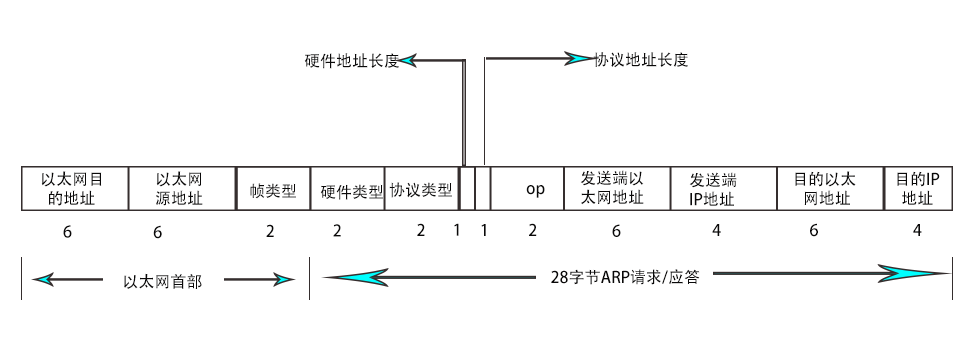
<style>
.page{position:relative;width:972px;height:359px;background:#ffffff}
.page>*{position:absolute;margin:0}
.t1{font:16px "AdobeHeitiStd-Regular";color:#0a0909}
</style>
<div class="page">
<p class="t1" style="left:304px;top:53px;width:95px;height:16px">硬件地址长度</p>
<p class="t1" style="left:593px;top:52px;width:95px;height:16px">协议地址长度</p>
<p class="t1" style="left:41px;top:171px;width:61px;height:35px">以太网目<br>  的地址</p>
<p class="t1" style="left:156px;top:171px;width:47px;height:35px">以太网<br>源地址</p>
<p class="t1" style="left:580px;top:170px;width:64px;height:35px">发送端以<br>太网地址</p>
<p class="t1" style="left:689px;top:172px;width:48px;height:34px">发送端<br>IP地址</p>
<p class="t1" style="left:795px;top:171px;width:61px;height:35px">目的以太<br>   网地址</p>
<p class="t1" style="left:897px;top:171px;width:43px;height:34px">目的IP<br>  地址</p>
<p class="t1" style="left:250px;top:183px;width:46px;height:16px">帧类型</p>
<p class="t1" style="left:320px;top:184px;width:63px;height:16px">硬件类型</p>
<p class="t1" style="left:389px;top:182px;width:63px;height:16px">协议类型</p>
<p class="t1" style="left:526px;top:185px;width:19px;height:13px">op</p>
<p class="t1" style="left:63px;top:225px;width:9px;height:13px">6</p>
<p class="t1" style="left:153px;top:225px;width:9px;height:14px">6</p>
<p class="t1" style="left:266px;top:224px;width:8px;height:13px">2</p>
<p class="t1" style="left:333px;top:224px;width:8px;height:13px">2</p>
<p class="t1" style="left:417px;top:223px;width:8px;height:13px">2</p>
<p class="t1" style="left:454px;top:223px;width:5px;height:13px">1</p>
<p class="t1" style="left:481px;top:224px;width:5px;height:12px">1</p>
<p class="t1" style="left:529px;top:223px;width:8px;height:13px">2</p>
<p class="t1" style="left:612px;top:224px;width:9px;height:13px">6</p>
<p class="t1" style="left:712px;top:224px;width:9px;height:12px">4</p>
<p class="t1" style="left:810px;top:223px;width:8px;height:14px">6</p>
<p class="t1" style="left:913px;top:224px;width:9px;height:12px">4</p>
<p class="t1" style="left:551px;top:269px;width:149px;height:16px">28字节ARP请求/应答</p>
<p class="t1" style="left:124px;top:273px;width:78px;height:16px">以太网首部</p>
</div>
